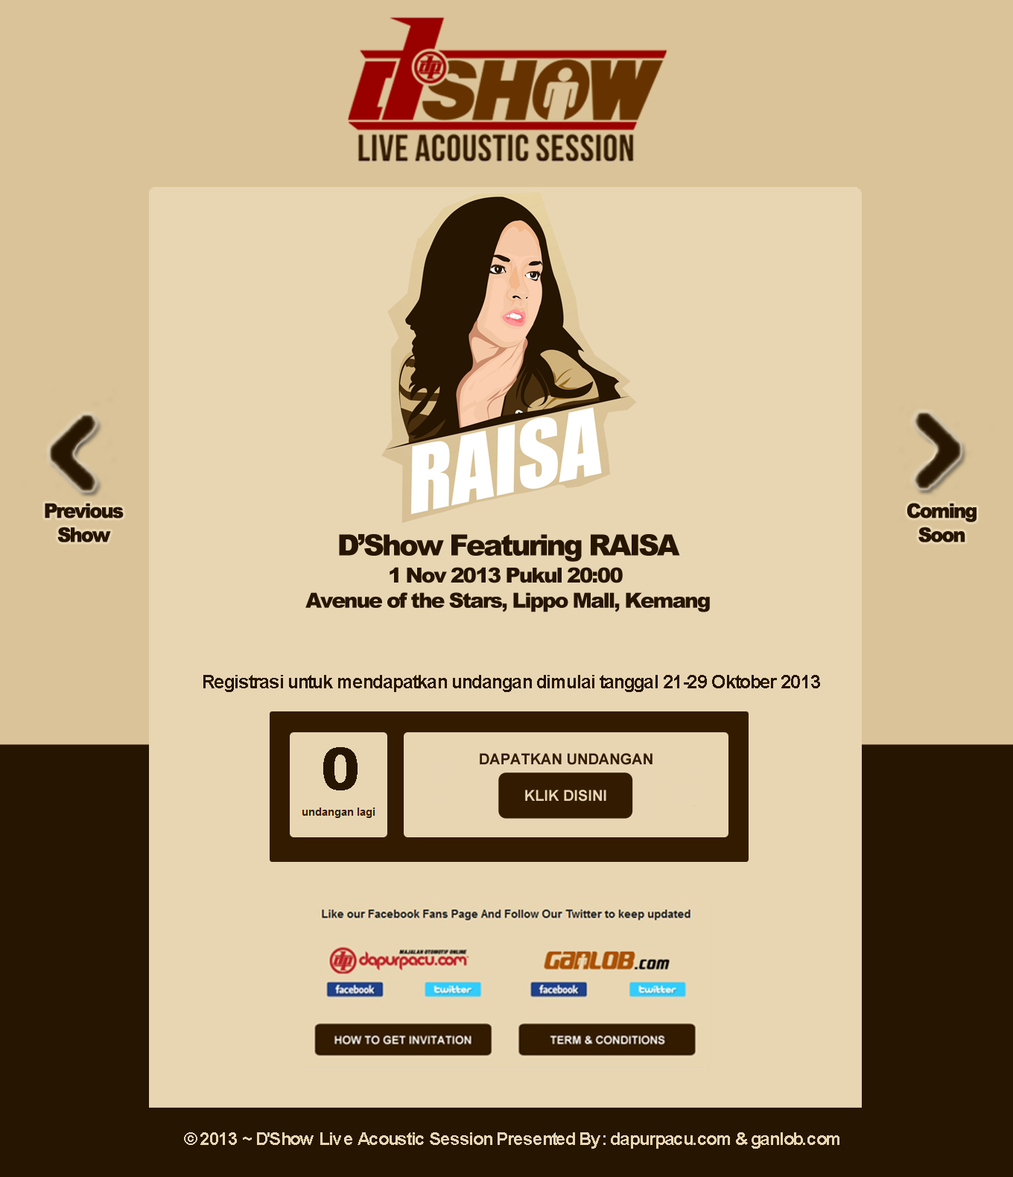
<style>
.page{position:relative;width:1013px;height:1177px;background:#e8d6b3}
.page>*{position:absolute;margin:0}
.t1{font:20.1px "Arial-Black";letter-spacing:-0.1em;color:#261501;font-weight:bold;scale:0.95 1}
.t2{font:29px "Arial-Black";letter-spacing:-0.075em;color:#261501}
.t3{font:20.9px "Arial-Black";letter-spacing:-0.075em;color:#261501}
.t4{font:18.5px "Arial-BoldMT";letter-spacing:-0.075em;color:#261501}
.t5{font:58.4px "Arial-Black";letter-spacing:-0.075em;color:#261501}
.t6{font:17.6px "Arial-BoldMT";letter-spacing:-0.075em;color:#e8d6b3}
</style>
<div class="page">
<p class="t1" style="left:45px;top:503px;width:79px;height:39px;text-align:center">Previous<br>Show</p>
<p class="t1" style="left:907px;top:503px;width:70px;height:39px;text-align:center">Coming<br>Soon</p>
<p class="t2" style="left:339px;top:534px;width:341px;height:28px">D’Show Featuring RAISA</p>
<p class="t3" style="left:305px;top:567px;width:405px;height:45px;text-align:center">1 Nov 2013 Pukul 20:00 <br>Avenue of the Stars, Lippo Mall, Kemang</p>
<p class="t4" style="left:203px;top:675px;width:617px;height:17px">Registrasi untuk mendapatkan undangan dimulai tanggal 21-29 Oktober 2013</p>
<p class="t5" style="left:323px;top:747px;width:35px;height:43px">0</p>
<p class="t6" style="left:184px;top:1132px;width:656px;height:17px">© 2013 ~ D'Show Live Acoustic Session Presented By : dapurpacu.com &amp; ganlob.com</p>
</div>
